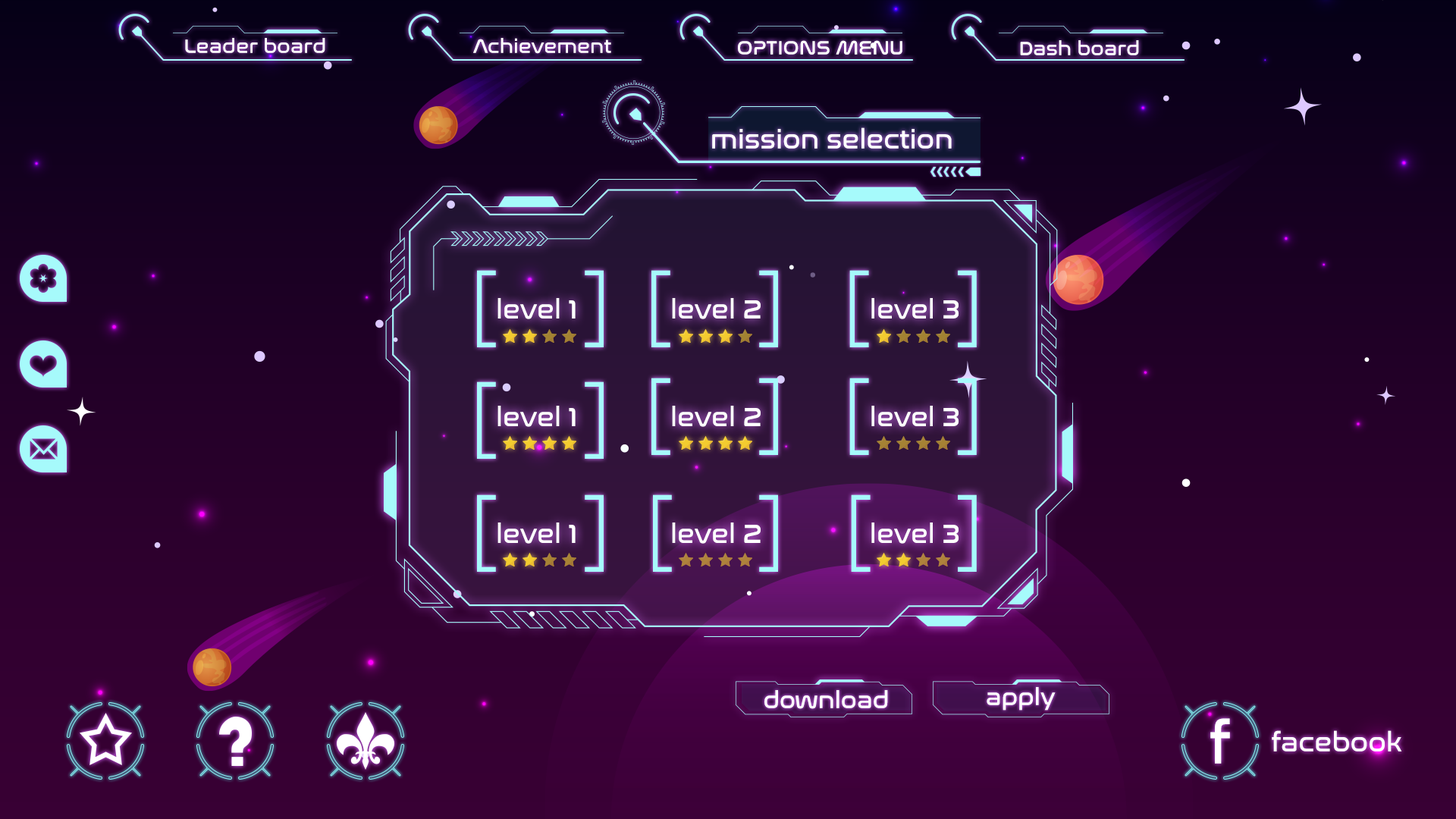
<style>
.page{position:relative;width:1456px;height:819px}
.page>*{position:absolute;margin:0}
.t1{font:19.7px "NasalizationRg-Regular";color:#ffffff}
.t2{font:26.6px "NasalizationRg-Regular";color:#ffffff}
.t3{font:66.4px "NasalizationRg-Regular";color:#a6fafb}
.t4{font:23.7px "NasalizationRg-Regular";color:#ffffff}
.t5{font:59.2px "NasalizationRg-Regular";color:#ffffff}
</style>
<div class="page">
<p class="t1" style="left:185px;top:38px;width:140px;height:15px">Leader board</p>
<p class="t1" style="left:473px;top:38px;width:138px;height:16px">Achievement</p>
<p class="t1" style="left:738px;top:40px;width:164px;height:15px">OPTIONS MENU</p>
<p class="t1" style="left:1020px;top:40px;width:119px;height:15px">Dash board</p>
<p class="t2" style="left:712px;top:127px;width:240px;height:22px">mission selection</p>
<p class="t3" style="left:477px;top:270px;width:19px;height:77px">[</p>
<p class="t3" style="left:585px;top:270px;width:19px;height:77px">]</p>
<p class="t3" style="left:651px;top:270px;width:19px;height:77px">[</p>
<p class="t3" style="left:759px;top:270px;width:19px;height:77px">]</p>
<p class="t3" style="left:849px;top:270px;width:20px;height:77px">[</p>
<p class="t3" style="left:958px;top:270px;width:19px;height:77px">]</p>
<p class="t2" style="left:497px;top:298px;width:79px;height:21px">level 1</p>
<p class="t2" style="left:672px;top:298px;width:89px;height:21px">level 2</p>
<p class="t2" style="left:871px;top:298px;width:88px;height:21px">level 3</p>
<p class="t3" style="left:651px;top:378px;width:19px;height:77px">[</p>
<p class="t3" style="left:759px;top:378px;width:19px;height:77px">]</p>
<p class="t3" style="left:849px;top:378px;width:20px;height:77px">[</p>
<p class="t3" style="left:958px;top:378px;width:19px;height:77px">]</p>
<p class="t3" style="left:477px;top:381px;width:19px;height:78px">[</p>
<p class="t3" style="left:585px;top:381px;width:19px;height:78px">]</p>
<p class="t2" style="left:497px;top:406px;width:79px;height:21px">level 1</p>
<p class="t2" style="left:672px;top:406px;width:89px;height:21px">level 2</p>
<p class="t2" style="left:871px;top:406px;width:88px;height:21px">level 3</p>
<p class="t3" style="left:477px;top:494px;width:19px;height:78px">[</p>
<p class="t3" style="left:585px;top:494px;width:19px;height:78px">]</p>
<p class="t3" style="left:653px;top:494px;width:19px;height:78px">[</p>
<p class="t3" style="left:759px;top:494px;width:19px;height:78px">]</p>
<p class="t3" style="left:851px;top:494px;width:20px;height:78px">[</p>
<p class="t3" style="left:958px;top:494px;width:19px;height:78px">]</p>
<p class="t2" style="left:497px;top:522px;width:79px;height:22px">level 1</p>
<p class="t2" style="left:672px;top:522px;width:89px;height:22px">level 2</p>
<p class="t2" style="left:871px;top:522px;width:88px;height:22px">level 3</p>
<p class="t4" style="left:987px;top:687px;width:69px;height:24px">apply</p>
<p class="t4" style="left:764px;top:690px;width:124px;height:19px">download</p>
<p class="t5" style="left:1210px;top:718px;width:20px;height:46px">f</p>
<p class="t2" style="left:1272px;top:730px;width:130px;height:21px">facebook</p>
</div>
